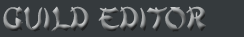
<style>
.page{position:relative;width:244px;height:37px;background:#353a3d}
.page>*{position:absolute;margin:0}
.t1{font:36px "MandarinD"}
</style>
<div class="page">
<p class="t1" style="left:3px;top:6px;width:203px;height:26px">Guild Editor</p>
</div>
